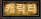
<style>
.page{position:relative;width:41px;height:19px}
.page>*{position:absolute;margin:0}
.t1{font:10px "NanumBarunGothic";letter-spacing:0.2em;color:#f6cc96}
</style>
<div class="page">
<p class="t1" style="left:5px;top:3px;width:31px;height:11px">캐릭터</p>
</div>
